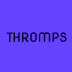
<style>
.page{position:relative;width:72px;height:72px;background:#6442ff}
.page>*{position:absolute;margin:0}
.t1{font:12.5px "NovaFlat";color:#000000}
</style>
<div class="page">
<p class="t1" style="left:6px;top:32px;width:61px;height:10px">THROMPS</p>
</div>
